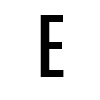
<style>
.page{position:relative;width:100px;height:100px;background:#ffffff}
.page>*{position:absolute;margin:0}
.t1{font:100px "TwCenMT-Condensed";color:#000000}
</style>
<div class="page">
<p class="t1" style="left:40px;top:15px;width:24px;height:62px">E</p>
</div>
